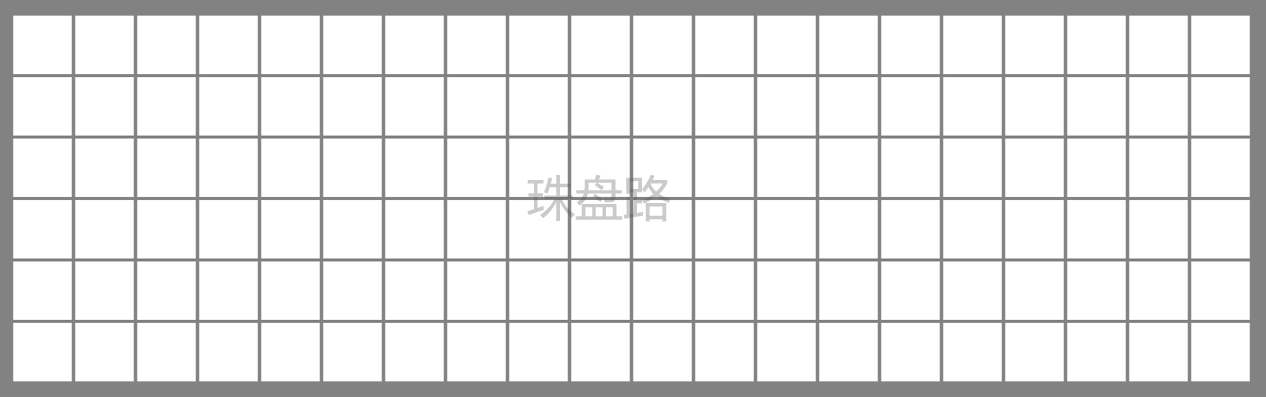
<style>
.page{position:relative;width:1266px;height:397px;background:#ffffff}
.page>*{position:absolute;margin:0}
.t1{font:48px "MicrosoftYaHei";color:#cbcaca}
</style>
<div class="page">
<p class="t1" style="left:527px;top:174px;width:144px;height:48px">珠盘路</p>
</div>
